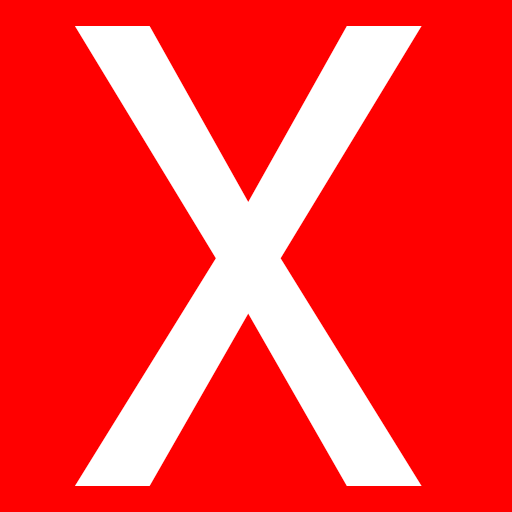
<style>
.page{position:relative;width:512px;height:512px;background:#ff0000}
.page>*{position:absolute;margin:0}
.t1{font:662.6px "CascadiaMono-Roman";color:#ffffff}
</style>
<div class="page">
<p class="t1" style="left:75px;top:26px;width:347px;height:460px">X</p>
</div>
